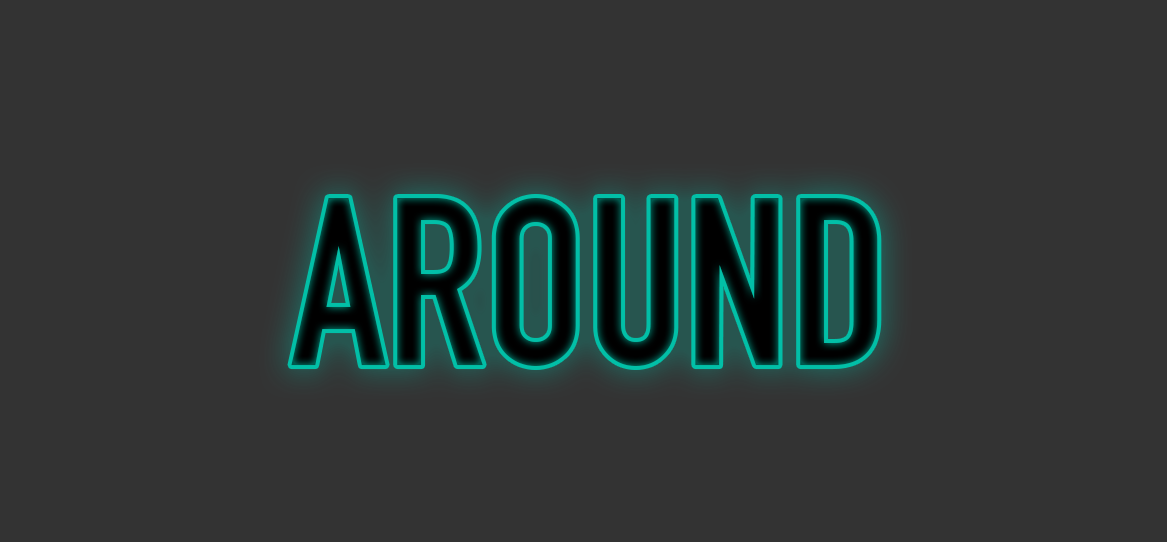
<style>
.page{position:relative;width:1167px;height:542px;background:#333333}
.page>*{position:absolute;margin:0}
.t1{font:233.7px "DINEngschrift";color:#000c0a;text-transform:uppercase}
</style>
<div class="page">
<p class="t1" style="left:291px;top:198px;width:587px;height:168px">around</p>
</div>
